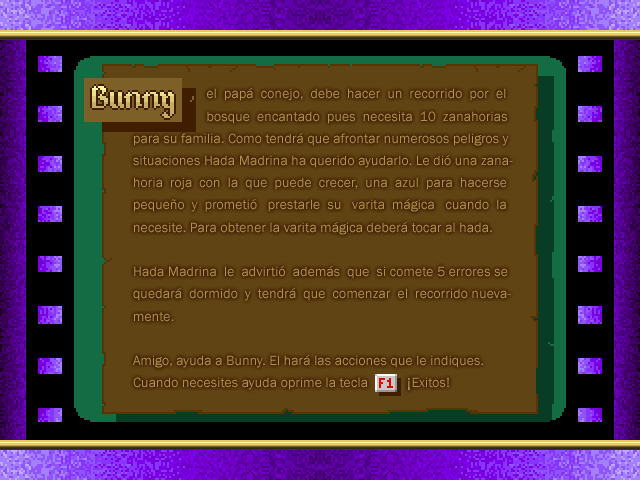
<style>
.page{position:relative;width:640px;height:480px;background:#604414}
.page>*{position:absolute;margin:0}
.t1{font:14px/22.2px "FranklinGothic-Book";color:#ac9450}
.t2{font:18px/22.2px "FranklinGothic-Book";color:#ac9450}
</style>
<div class="page">
<p class="t1" style="left:133px;top:88px;width:380px;height:302px">el  papá  conejo,  debe  hacer  un  recorrido  por  el <br>                     bosque  encantado  pues  necesita  10  zanahorias <br>para su familia. Como tendrá que afrontar numerosos peligros y<br>situaciones Hada Madrina ha querido ayudarlo. Le dió una zana-<br>horia  roja  con  la  que  puede  crecer,  una  azul  para  hacerse pequeño  y  prometió   prestarle  su   varita  mágica   cuando  la necesite. Para obtener la varita mágica deberá tocar al hada.<br><br>Hada Madrina  le  advirtió  además  que  si comete 5 errores se<br>quedará  dormido  y  tendrá  que  comenzar  el  recorrido nueva-<br>mente.<br><br>Amigo, ayuda a Bunny. El hará las acciones que le indiques. Cuando necesites ayuda oprime la tecla           <span class="t2">¡</span>Exitos!</p>
</div>
